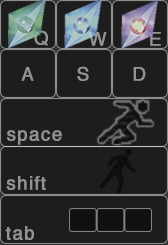
<style>
.page{position:relative;width:168px;height:245px;background:#1d1d1d}
.page>*{position:absolute;margin:0}
.t1{font:18.7px "Helvetica";letter-spacing:0.05em;color:#939393;font-weight:bold}
</style>
<div class="page">
<p class="t1" style="left:34px;top:30px;width:14px;height:16px">Q</p>
<p class="t1" style="left:89px;top:32px;width:18px;height:14px">W</p>
<p class="t1" style="left:150px;top:32px;width:11px;height:14px">E</p>
<p class="t1" style="left:21px;top:67px;width:13px;height:14px">A</p>
<p class="t1" style="left:77px;top:66px;width:12px;height:15px">S</p>
<p class="t1" style="left:133px;top:67px;width:13px;height:14px">D</p>
<p class="t1" style="left:7px;top:130px;width:55px;height:15px">space</p>
<p class="t1" style="left:6px;top:176px;width:40px;height:14px">shift</p>
<p class="t1" style="left:5px;top:226px;width:29px;height:14px">tab</p>
</div>
